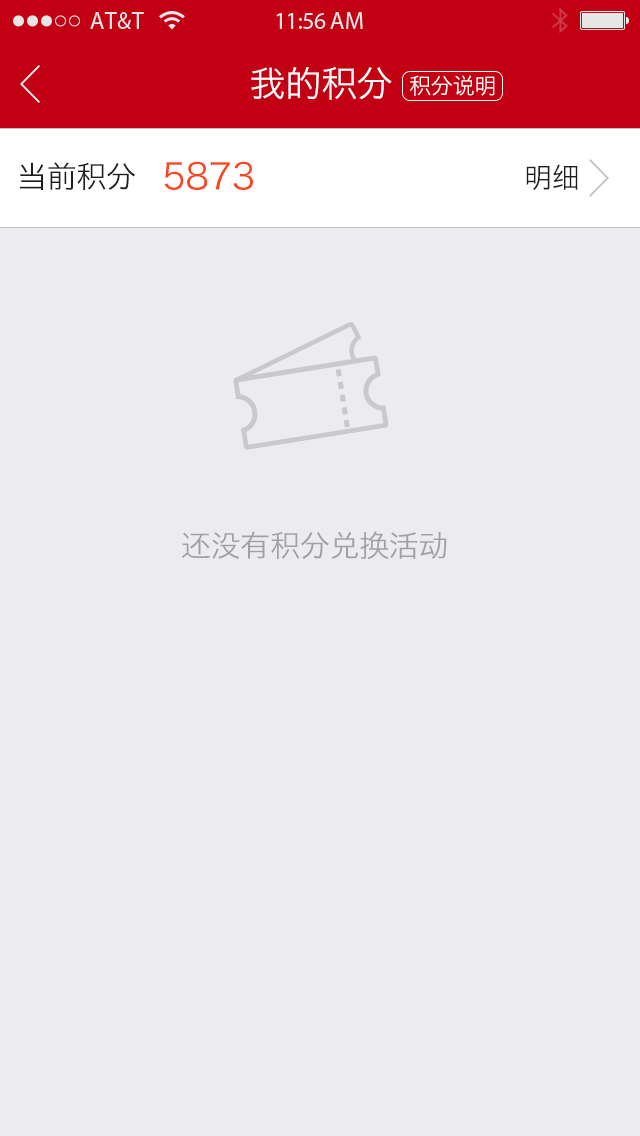
<style>
.page{position:relative;width:640px;height:1136px;background:#ebebf0}
.page>*{position:absolute;margin:0}
.t1{font:36px "HiraginoSansGB-W3";letter-spacing:-0.01em;color:#ffffff}
.t2{font:22px "HiraginoSansGB-W3";letter-spacing:-0.01em;color:#ffffff}
.t3{font:36px "HiraginoSansGB-W3";letter-spacing:-0.01em;color:#fb451f}
.t4{font:30px "HiraginoSansGB-W3";letter-spacing:-0.01em;color:#1e1e1e}
.t5{font:28px "HiraginoSansGB-W3";letter-spacing:-0.01em;color:#1e1e1e}
.t6{font:30px "HiraginoSansGB-W3";letter-spacing:-0.01em;color:#a0a0a0}
</style>
<div class="page">
<p class="t1" style="left:251px;top:67px;width:141px;height:33px">我的积分</p>
<p class="t2" style="left:410px;top:75px;width:85px;height:21px">积分说明</p>
<p class="t3" style="left:164px;top:161px;width:89px;height:29px">5873</p>
<p class="t4" style="left:20px;top:162px;width:116px;height:28px">当前积分</p>
<p class="t5" style="left:526px;top:164px;width:52px;height:26px">明细</p>
<p class="t6" style="left:182px;top:531px;width:265px;height:29px">还没有积分兑换活动</p>
</div>
